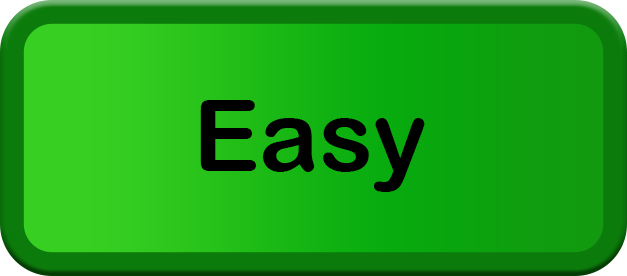
<style>
.page{position:relative;width:627px;height:276px}
.page>*{position:absolute;margin:0}
.t1{font:100px "ArialRoundedMTBold";color:#000000}
</style>
<div class="page">
<p class="t1" style="left:200px;top:100px;width:225px;height:92px">Easy</p>
</div>
